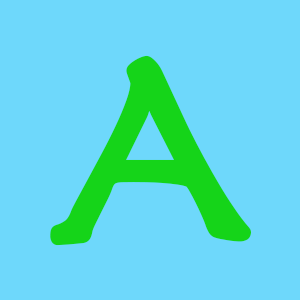
<style>
.page{position:relative;width:300px;height:300px;background:#6ed8fb}
.page>*{position:absolute;margin:0}
.t1{font:300px "Herculanum";color:#15d419;font-weight:bold}
</style>
<div class="page">
<p class="t1" style="left:50px;top:55px;width:201px;height:191px">A</p>
</div>
